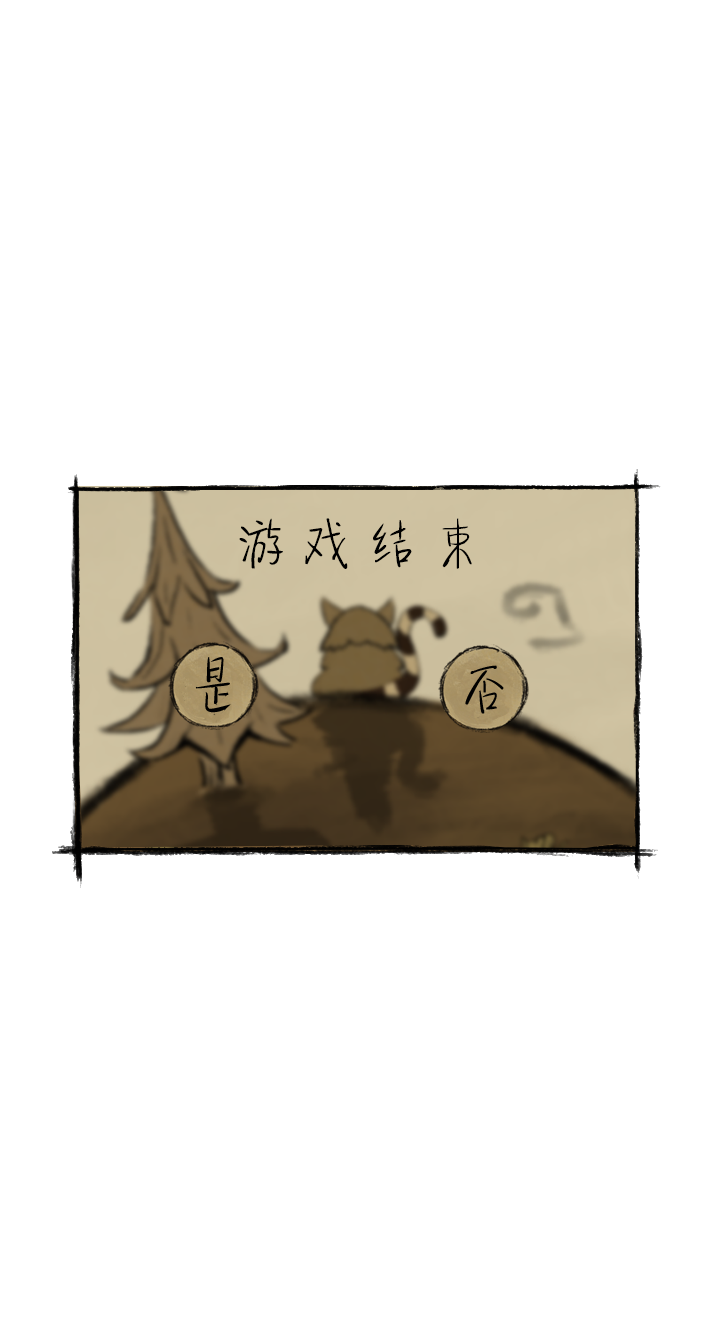
<style>
.page{position:relative;width:714px;height:1342px;background:#ffffff}
.page>*{position:absolute;margin:0}
.t1{font:50px "SentyTEA-basic";letter-spacing:0.3em;color:#000000}
</style>
<div class="page">
<p class="t1" style="left:239px;top:518px;width:233px;height:51px">游戏结束</p>
</div>
